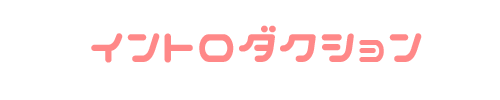
<style>
.page{position:relative;width:500px;height:100px;background:#ffffff}
.page>*{position:absolute;margin:0}
.t1{font:48px "NicoMoji+";color:#ff8888}
</style>
<div class="page">
<p class="t1" style="left:91px;top:25px;width:331px;height:38px">イントロダクション</p>
</div>
